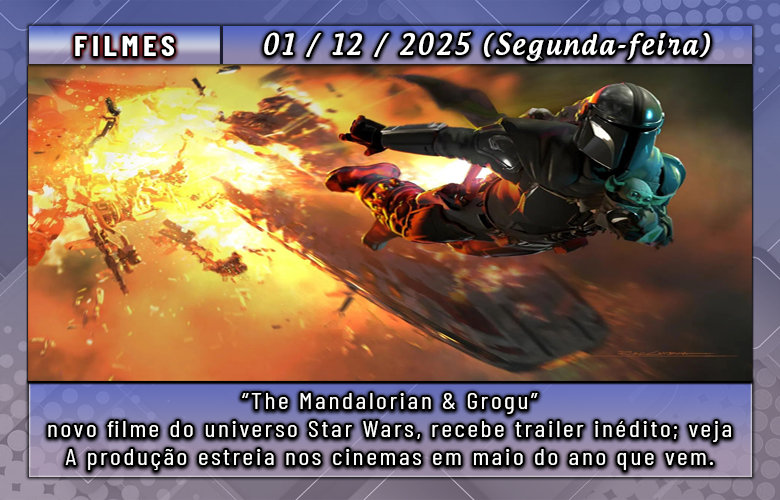
<style>
.page{position:relative;width:780px;height:500px}
.page>*{position:absolute;margin:0}
.t1{font:28.3px "BarlowCondensed-Bold";letter-spacing:0.15em;color:#ffffff;scale:1.09 1}
.t2{font:28.3px "AndrogyneMedium";letter-spacing:0.1em;color:#ffffff;scale:0.92 1}
.t3{font:23.5px/28px "BarlowCondensed-Regular";letter-spacing:0.1em;color:#ffffff;scale:1.1 1}
</style>
<div class="page">
<p class="t1" style="left:75px;top:36px;width:99px;height:20px">FILMES</p>
<p class="t2" style="left:264px;top:32px;width:446px;height:29px">01 / 12 / 2025 (Segunda-feira)</p>
<p class="t3" style="left:48px;top:393px;width:683px;height:77px;text-align:center">“The Mandalorian &amp; Grogu”<br>novo filme do universo Star Wars, recebe trailer inédito; veja<br>A produção estreia nos cinemas em maio do ano que vem.</p>
</div>
